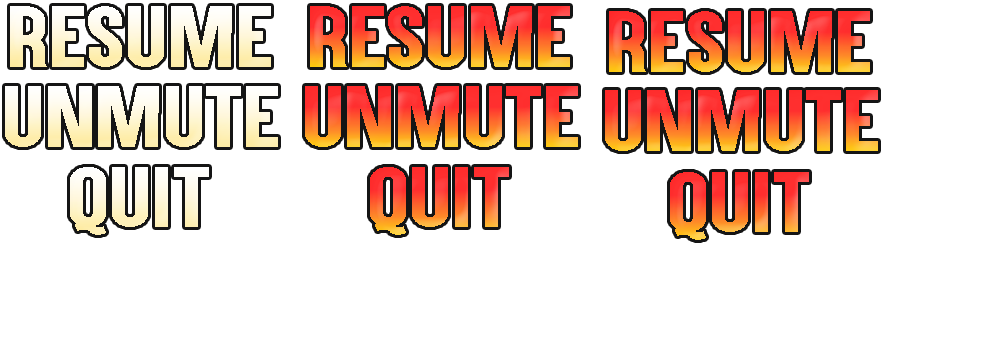
<style>
.page{position:relative;width:1000px;height:360px;background:#ffffff}
.page>*{position:absolute;margin:0}
.t1{font:72.1px "Aku&Kamu";letter-spacing:-0.01em;scale:1.33 1}
.t2{font:71.3px "Aku&Kamu";letter-spacing:-0.01em;scale:1.35 1}
.t3{font:70.9px "Aku&Kamu";letter-spacing:-0.01em;scale:1.35 1}
</style>
<div class="page">
<p class="t1" style="left:10px;top:6px;width:261px;height:61px">RESUME</p>
<p class="t1" style="left:310px;top:6px;width:260px;height:61px">RESUME</p>
<p class="t1" style="left:609px;top:11px;width:261px;height:61px">RESUME</p>
<p class="t2" style="left:5px;top:86px;width:273px;height:61px">unmute</p>
<p class="t2" style="left:305px;top:86px;width:273px;height:61px">unmute</p>
<p class="t2" style="left:605px;top:90px;width:273px;height:61px">unmute</p>
<p class="t3" style="left:70px;top:167px;width:139px;height:68px">quit</p>
<p class="t3" style="left:370px;top:167px;width:139px;height:68px">quit</p>
<p class="t3" style="left:670px;top:172px;width:139px;height:68px">quit</p>
</div>
